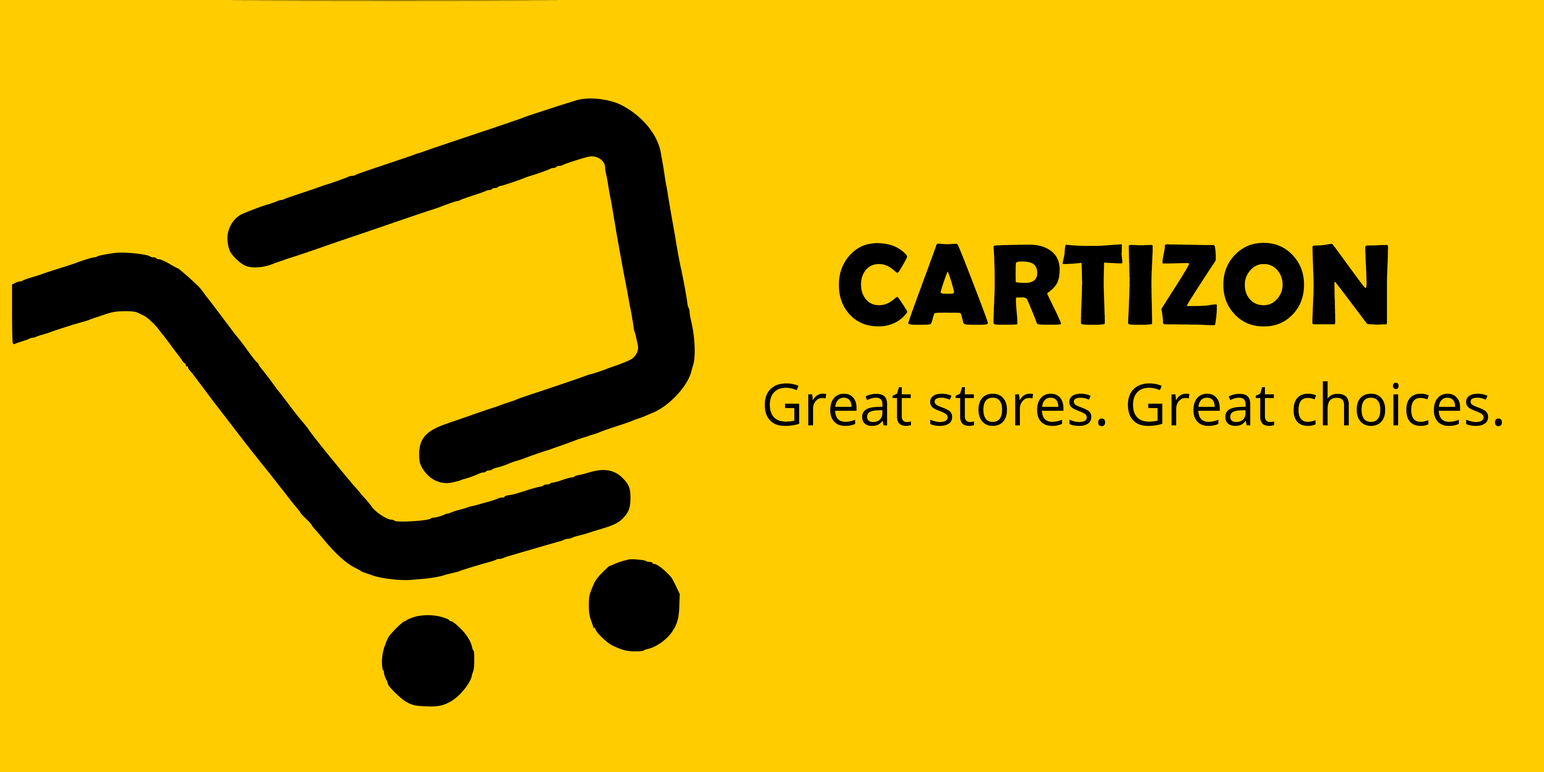
<style>
.page{position:relative;width:1544px;height:772px;background:#ffcc00}
.page>*{position:absolute;margin:0}
.t1{font:115.8px "BerlinSansFBDemi-Bold";color:#000000}
.t2{font:57.9px "OpenSans";color:#000000}
</style>
<div class="page">
<p class="t1" style="left:839px;top:243px;width:549px;height:84px">CARTIZON</p>
<p class="t2" style="left:765px;top:381px;width:737px;height:46px">Great stores. Great choices.</p>
</div>
